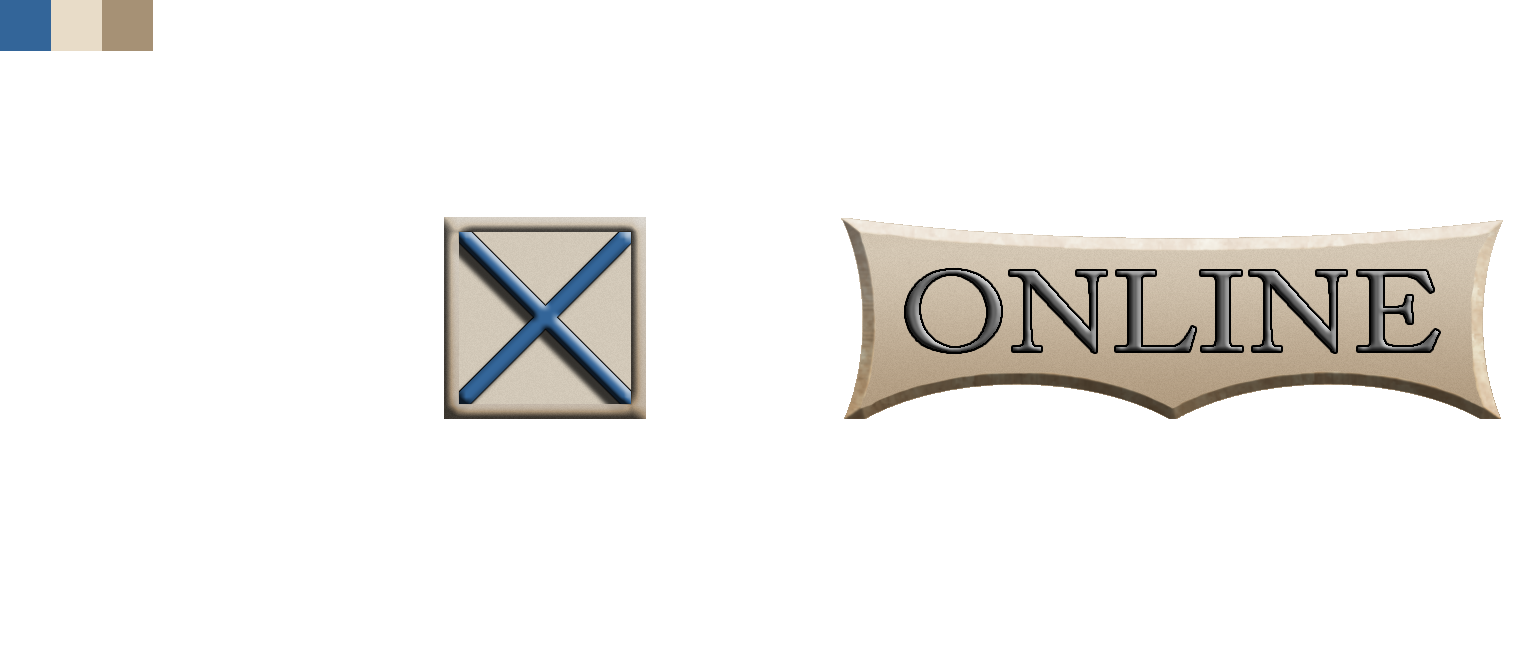
<style>
.page{position:relative;width:1528px;height:660px;background:#ffffff}
.page>*{position:absolute;margin:0}
.t1{font:112.5px "ACaslonPro-Regular";scale:1.17 1}
</style>
<div class="page">
<p class="t1" style="left:906px;top:270px;width:533px;height:82px">ONLINE</p>
</div>
